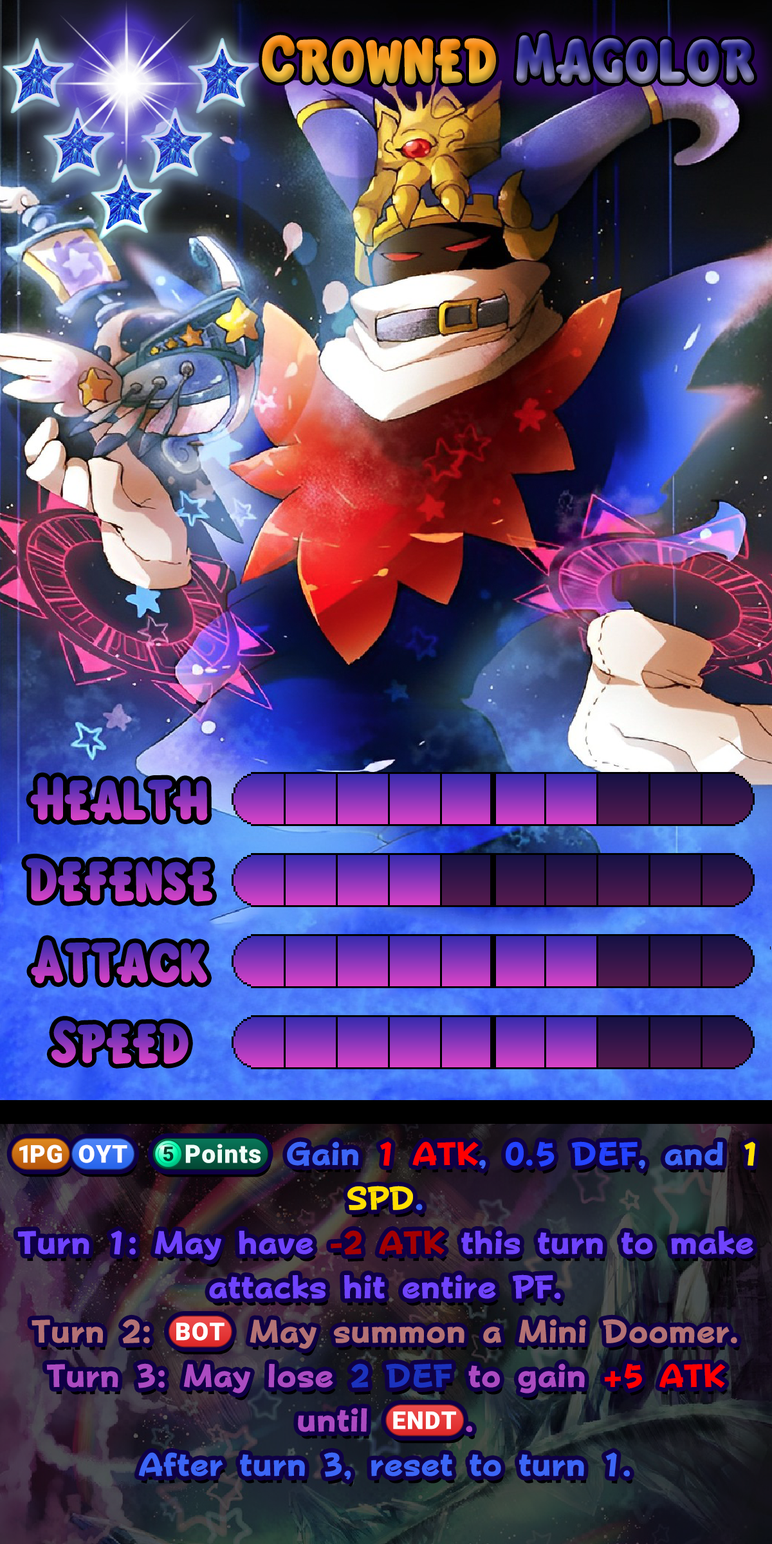
<style>
.page{position:relative;width:772px;height:1544px}
.page>*{position:absolute;margin:0}
.t1{font:102.3px "KirbyClassic"}
.t2{font:92.7px "KirbyClassic"}
.t3{font:55.3px/44.4px "FOTPopHappinessStrp-ExtraBold";color:#6f43fd}
.t4{font:55.3px/44.4px "stoogedings-Regular";color:#3c66f7}
.t5{font:55.3px/44.4px "stoogedings-Regular";letter-spacing:0.5em;color:#3c66f7}
.t6{font:56.5px/44.4px "stoogedings-Regular";color:#3c66f7}
.t7{font:55.3px/44.4px "FOTPopHappinessStrp-ExtraBold";color:#3c66f7}
.t8{font:55.3px/44.4px "FOTPopHappinessStrp-ExtraBold";color:#ff0000}
.t9{font:55.3px/44.4px "FOTPopHappinessStrp-ExtraBold";color:#2443ff}
.t10{font:55.3px/44.4px "FOTPopHappinessStrp-ExtraBold";color:#ffde00}
.t11{font:55.3px/44.4px "FOTPopHappinessStrp-ExtraBold";color:#a30000}
.t12{font:55.3px/44.4px "FOTPopHappinessStrp-ExtraBold";color:#b37274}
.t13{font:55.3px/44.4px "stoogedings-Regular";color:#b37274}
.t14{font:55.3px/44.4px "FOTPopHappinessStrp-ExtraBold";color:#ab4bc1}
.t15{font:55.3px/44.4px "FOTPopHappinessStrp-ExtraBold";color:#1b32bd}
.t16{font:55.3px/44.4px "stoogedings-Regular";color:#ab4bc1}
.t17{font:55.3px/44.4px "FOTPopHappinessStrp-ExtraBold";color:#3c66f6}
</style>
<div class="page">
<p class="t1" style="left:262px;top:35px;width:234px;height:49px">Crowned</p>
<p class="t1" style="left:516px;top:33px;width:238px;height:51px">Magolor</p>
<p class="t2" style="left:30px;top:777px;width:178px;height:44px">Health</p>
<p class="t2" style="left:26px;top:858px;width:186px;height:45px">Defense</p>
<p class="t2" style="left:31px;top:939px;width:176px;height:45px">Attack</p>
<p class="t2" style="left:51px;top:1021px;width:138px;height:43px">Speed</p>
<p class="t3" style="left:11px;top:1138px;width:744px;height:342px;text-align:center"><span class="t4">(1PG)</span><span class="t5">(OYT)</span><span class="t6">(5 points)</span><span class="t7"> Gain </span><span class="t8">1 ATK</span><span class="t7">, </span><span class="t9">0.5 DEF</span><span class="t7">, and </span><span class="t10">1 SPD</span><span class="t7">.<br></span>Turn 1: May have <span class="t11">-2 ATK</span> this turn to make attacks hit entire PF.<br><span class="t12">Turn 2: </span><span class="t13">(BOT)</span><span class="t12"> May summon a Mini Doomer.<br></span><span class="t14">Turn 3: May lose </span><span class="t15">2 DEF</span><span class="t14"> to gain </span><span class="t8">+5 ATK</span><span class="t14"> until </span><span class="t16">(ENDT)</span><span class="t14">.<br></span><span class="t17">After turn 3, reset to turn 1.</span></p>
</div>
